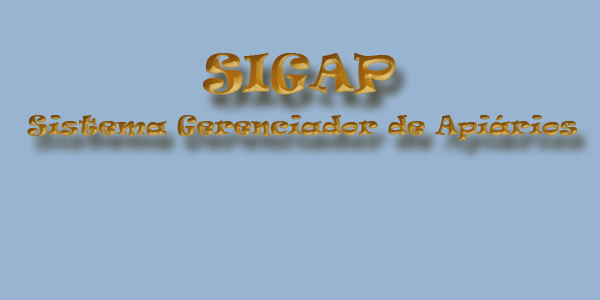
<style>
.page{position:relative;width:600px;height:300px;background:#99b4d1}
.page>*{position:absolute;margin:0}
.t1{font:24px "Ravie";font-weight:bold}
.t2{font:48px "Ravie";font-weight:bold}
</style>
<div class="page">
<p class="t1" style="left:27px;top:53px;width:551px;height:88px"><span class="t2">SIGAP<br>             </span>Sistema Gerenciador de Apiários</p>
</div>
